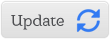
<style>
.page{position:relative;width:110px;height:40px}
.page>*{position:absolute;margin:0}
.t1{font:16px "Barkentina";color:#4d4e51}
</style>
<div class="page">
<p class="t1" style="left:11px;top:14px;width:53px;height:16px">Update</p>
</div>
